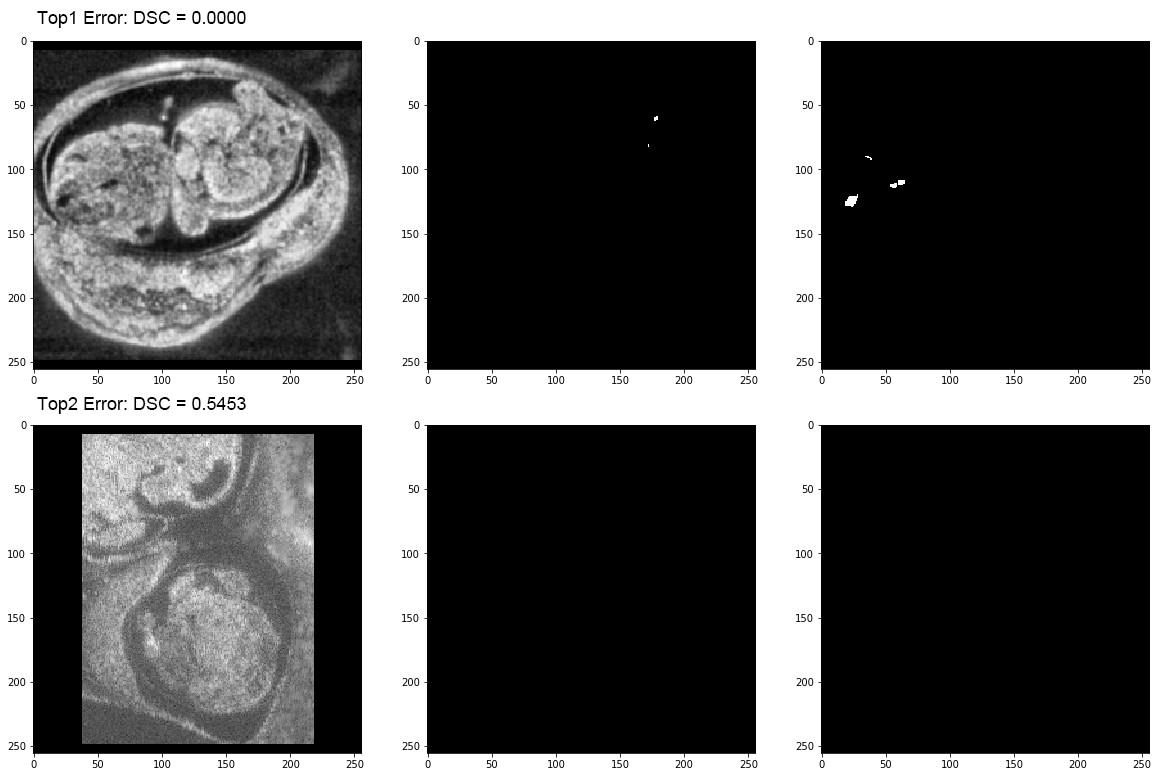
<style>
.page{position:relative;width:1159px;height:781px;background:#000000}
.page>*{position:absolute;margin:0}
.t1{font:18px "ArialMT";color:#000000}
</style>
<div class="page">
<p class="t1" style="left:37px;top:11px;width:209px;height:17px">Top1 Error: DSC = 0.0000</p>
<p class="t1" style="left:37px;top:397px;width:209px;height:17px">Top2 Error: DSC = 0.5453</p>
</div>
